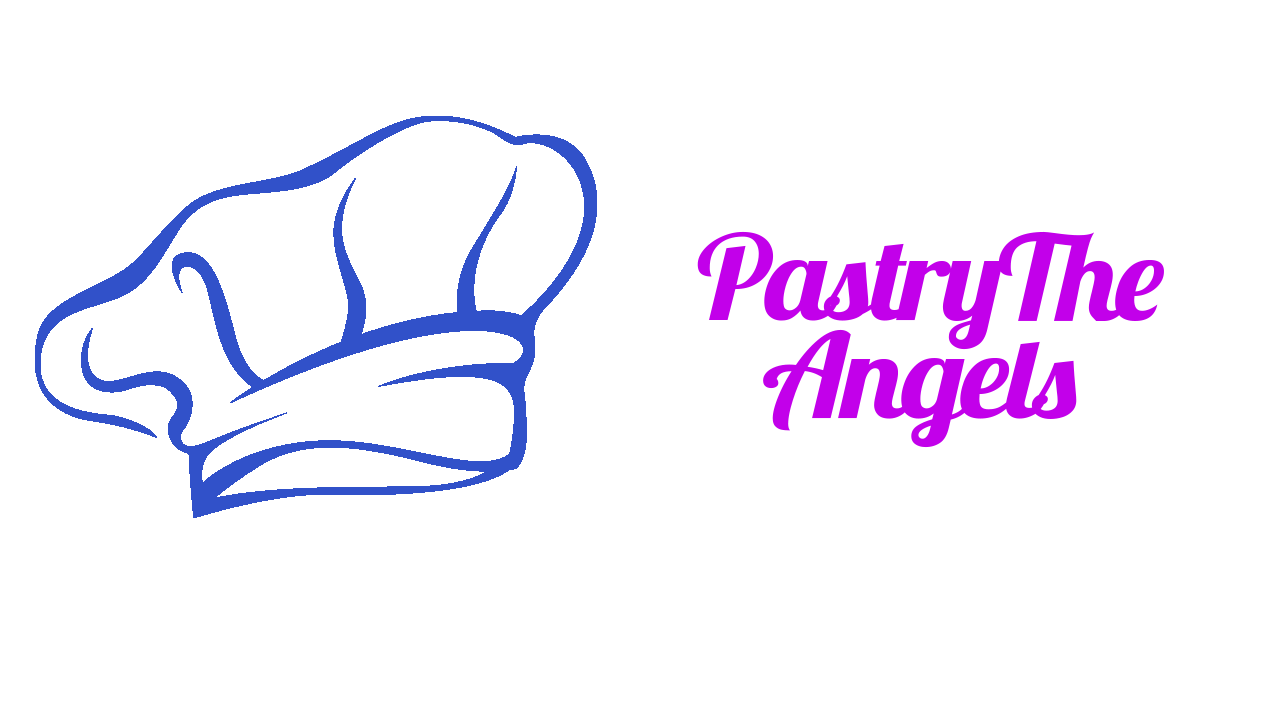
<style>
.page{position:relative;width:1280px;height:720px;background:#ffffff}
.page>*{position:absolute;margin:0}
.t1{font:117.7px/98.1px "Lobster-Regular";letter-spacing:-0.04em;color:#c200ea;scale:1.09 1}
</style>
<div class="page">
<p class="t1" style="left:697px;top:231px;width:467px;height:217px;text-align:center">PastryThe <br>Angels</p>
</div>
